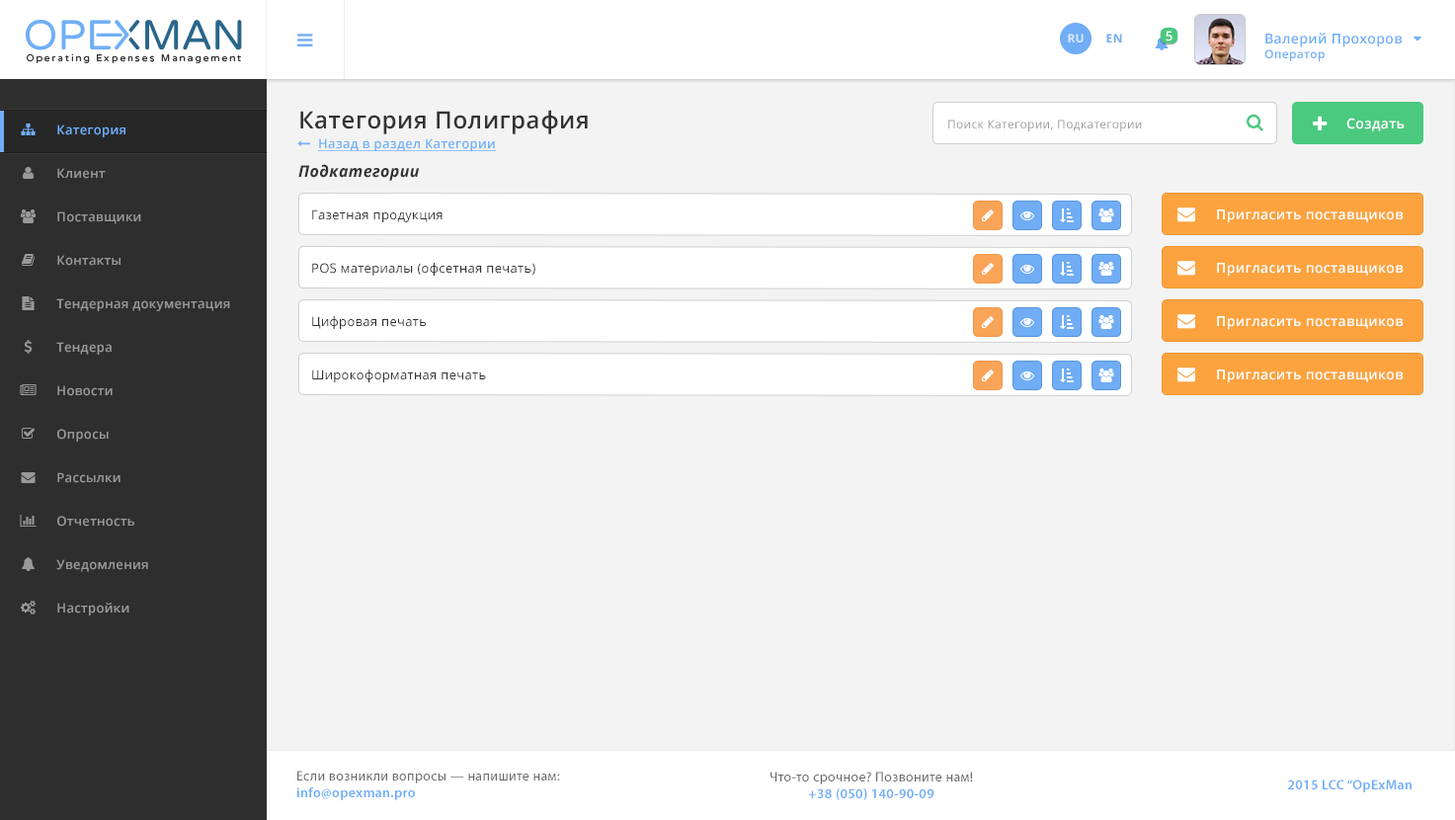
<style>
.page{position:relative;width:1455px;height:820px;background:#f3f3f3}
.page>*{position:absolute;margin:0}
.t1{font:11.9px "OpenSans-Bold";letter-spacing:0.025em;color:#dbe8fc;text-transform:uppercase}
.t2{font:11.9px "OpenSans-Bold";letter-spacing:0.025em;color:#70adf5;text-transform:uppercase}
.t3{font:12.8px "OpenSans-Semibold";letter-spacing:0.025em;color:#ffffff}
.t4{font:13.8px "OpenSans-Semibold";letter-spacing:0.025em;color:#6eaef7}
.t5{font:11.9px "OpenSans-Semibold";letter-spacing:0.025em;color:#6eaef7}
.t6{font:23.7px "OpenSans-Semibold";letter-spacing:0.025em;color:#333333}
.t7{font:12.8px "OpenSans-Semibold";letter-spacing:0.025em;color:#70adf5}
.t8{font:11.9px "OpenSans";letter-spacing:0.025em;color:#999999}
.t9{font:13.8px "OpenSans-Semibold";letter-spacing:0.025em;color:#ffffff}
.t10{font:12.8px "OpenSans-Semibold";letter-spacing:0.025em;color:#6faff8;text-decoration:underline}
.t11{font:12.8px "OpenSans-Semibold";letter-spacing:0.025em;color:#999999}
.t12{font:15.8px "OpenSans-BoldItalic";letter-spacing:0.025em;color:#333333}
.t13{font:12.8px "OpenSans";letter-spacing:0.025em;color:#333333}
.t14{font:13.8px "MyriadPro-Regular";letter-spacing:0.025em;color:#696969}
.t15{font:13.8px "MyriadPro-Semibold";letter-spacing:0.025em;color:#6eaef8}
</style>
<div class="page">
<p class="t1" style="left:1068px;top:34px;width:15px;height:8px">Ru</p>
<p class="t2" style="left:1106px;top:34px;width:16px;height:8px">EN</p>
<p class="t3" style="left:1165px;top:31px;width:7px;height:10px">5</p>
<p class="t4" style="left:1264px;top:33px;width:138px;height:28px">Валерий Прохоров<br><span class="t5">Оператор</span></p>
<p class="t6" style="left:300px;top:110px;width:288px;height:24px">Категория Полиграфия</p>
<p class="t7" style="left:57px;top:124px;width:68px;height:13px">Категория</p>
<p class="t8" style="left:948px;top:119px;width:194px;height:12px">Поиск Категории, Подкатегории</p>
<p class="t9" style="left:1346px;top:118px;width:58px;height:13px">Создать</p>
<p class="t10" style="left:318px;top:138px;width:179px;height:13px">Назад в раздел Категории</p>
<p class="t11" style="left:57px;top:168px;width:49px;height:11px">Клиент</p>
<p class="t12" style="left:298px;top:164px;width:121px;height:17px">Подкатегории</p>
<p class="t13" style="left:312px;top:209px;width:130px;height:13px">Газетная продукция</p>
<p class="t9" style="left:1217px;top:209px;width:186px;height:14px">Пригласить поставщиков</p>
<p class="t11" style="left:57px;top:211px;width:84px;height:13px">Поставщики</p>
<p class="t11" style="left:57px;top:255px;width:63px;height:11px">Контакты</p>
<p class="t13" style="left:312px;top:263px;width:223px;height:13px">POS материалы (офсетная печать)</p>
<p class="t9" style="left:1217px;top:263px;width:186px;height:14px">Пригласить поставщиков</p>
<p class="t11" style="left:56px;top:298px;width:174px;height:13px">Тендерная документация</p>
<p class="t13" style="left:312px;top:316px;width:115px;height:13px">Цифровая печать</p>
<p class="t9" style="left:1217px;top:316px;width:186px;height:14px">Пригласить поставщиков</p>
<p class="t11" style="left:56px;top:342px;width:56px;height:13px">Тендера</p>
<p class="t13" style="left:312px;top:369px;width:174px;height:13px">Широкоформатная печать</p>
<p class="t9" style="left:1217px;top:369px;width:186px;height:14px">Пригласить поставщиков</p>
<p class="t11" style="left:57px;top:385px;width:56px;height:11px">Новости</p>
<p class="t11" style="left:57px;top:429px;width:52px;height:12px">Опросы</p>
<p class="t11" style="left:57px;top:472px;width:63px;height:11px">Рассылки</p>
<p class="t11" style="left:57px;top:516px;width:77px;height:10px">Отчетность</p>
<p class="t11" style="left:56px;top:559px;width:92px;height:13px">Уведомления</p>
<p class="t11" style="left:57px;top:602px;width:72px;height:13px">Настройки</p>
<p class="t14" style="left:296px;top:770px;width:264px;height:30px">Если возникли вопросы — напишите нам:<br><span class="t15">info@opexman.pro</span></p>
<p class="t14" style="left:770px;top:771px;width:203px;height:29px;text-align:center">Что-то срочное? Позвоните нам!<br><span class="t15">+38 (050) 140-90-09</span></p>
<p class="t15" style="left:1288px;top:779px;width:123px;height:13px">2015 LCC “OpExMan</p>
</div>
